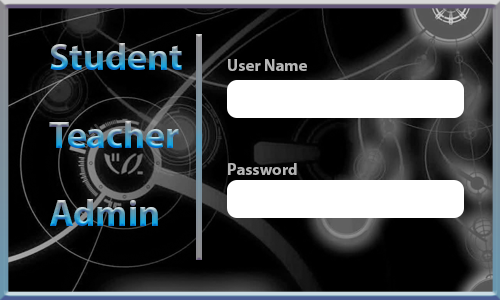
<style>
.page{position:relative;width:500px;height:300px;background:#000000}
.page>*{position:absolute;margin:0}
.t1{font:37.5px "MyriadPro-Bold"}
.t2{font:16.7px "MyriadPro-Bold";color:#b5b5b5}
</style>
<div class="page">
<p class="t1" style="left:50px;top:43px;width:132px;height:27px">Student</p>
<p class="t2" style="left:228px;top:59px;width:79px;height:12px">User Name</p>
<p class="t1" style="left:49px;top:121px;width:130px;height:27px">Teacher</p>
<p class="t2" style="left:228px;top:163px;width:69px;height:12px">Password</p>
<p class="t1" style="left:50px;top:199px;width:108px;height:27px">Admin</p>
</div>
